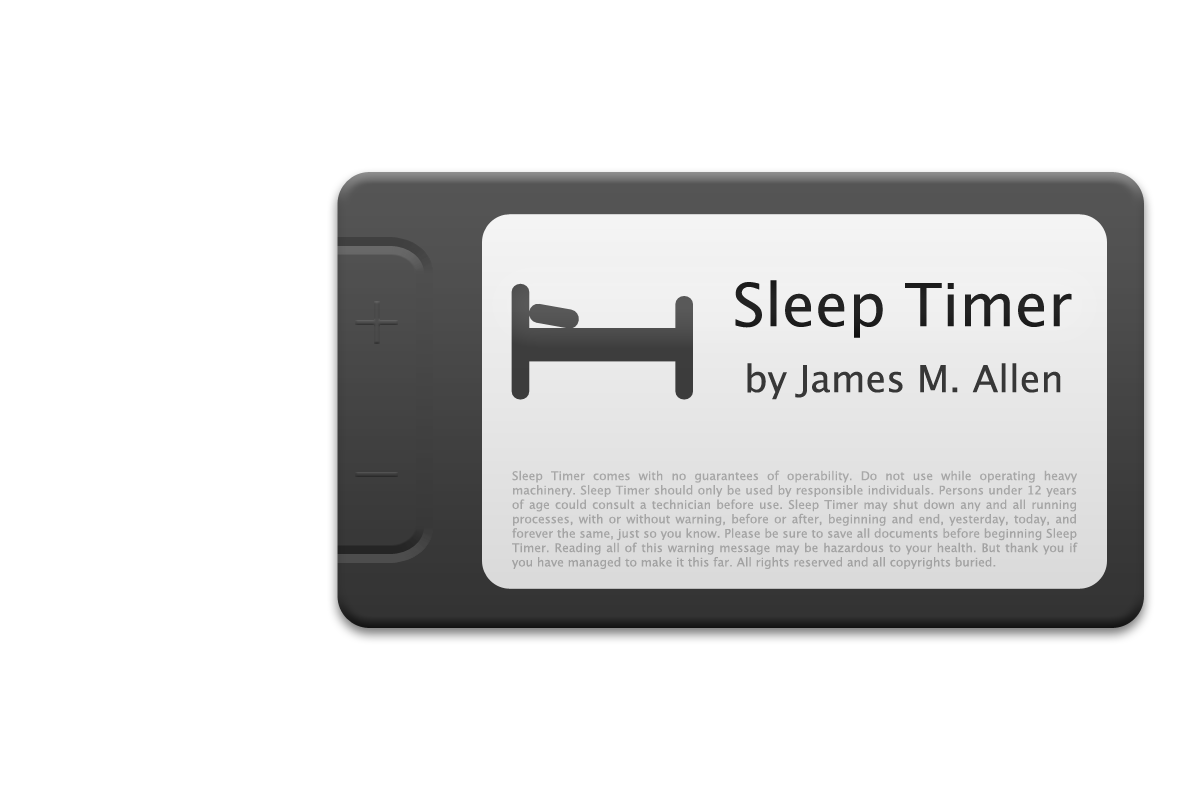
<style>
.page{position:relative;width:1200px;height:800px;background:#ffffff}
.page>*{position:absolute;margin:0}
.t1{font:59.5px "LucidaSansUnicode";color:#222222}
.t2{font:37.2px "LucidaSansUnicode";color:#373737}
.t3{font:12px "LucidaSans";color:#a5a5a5}
</style>
<div class="page">
<p class="t1" style="left:735px;top:280px;width:337px;height:58px">Sleep Timer</p>
<p class="t2" style="left:747px;top:363px;width:314px;height:37px">by James M. Allen</p>
<p class="t3" style="left:512px;top:470px;width:566px;height:99px;text-align:justify">Sleep Timer comes with no guarantees of operability. Do not use while operating heavy machinery. Sleep Timer should only be used by responsible individuals. Persons under 12 years of age could consult a technician before use. Sleep Timer may shut down any and all running processes, with or without warning, before or after, beginning and end, yesterday, today, and forever the same, just so you know. Please be sure to save all documents before beginning Sleep Timer. Reading all of this warning message may be hazardous to your health. But thank you if you have managed to make it this far. All rights reserved and all copyrights buried.</p>
</div>
